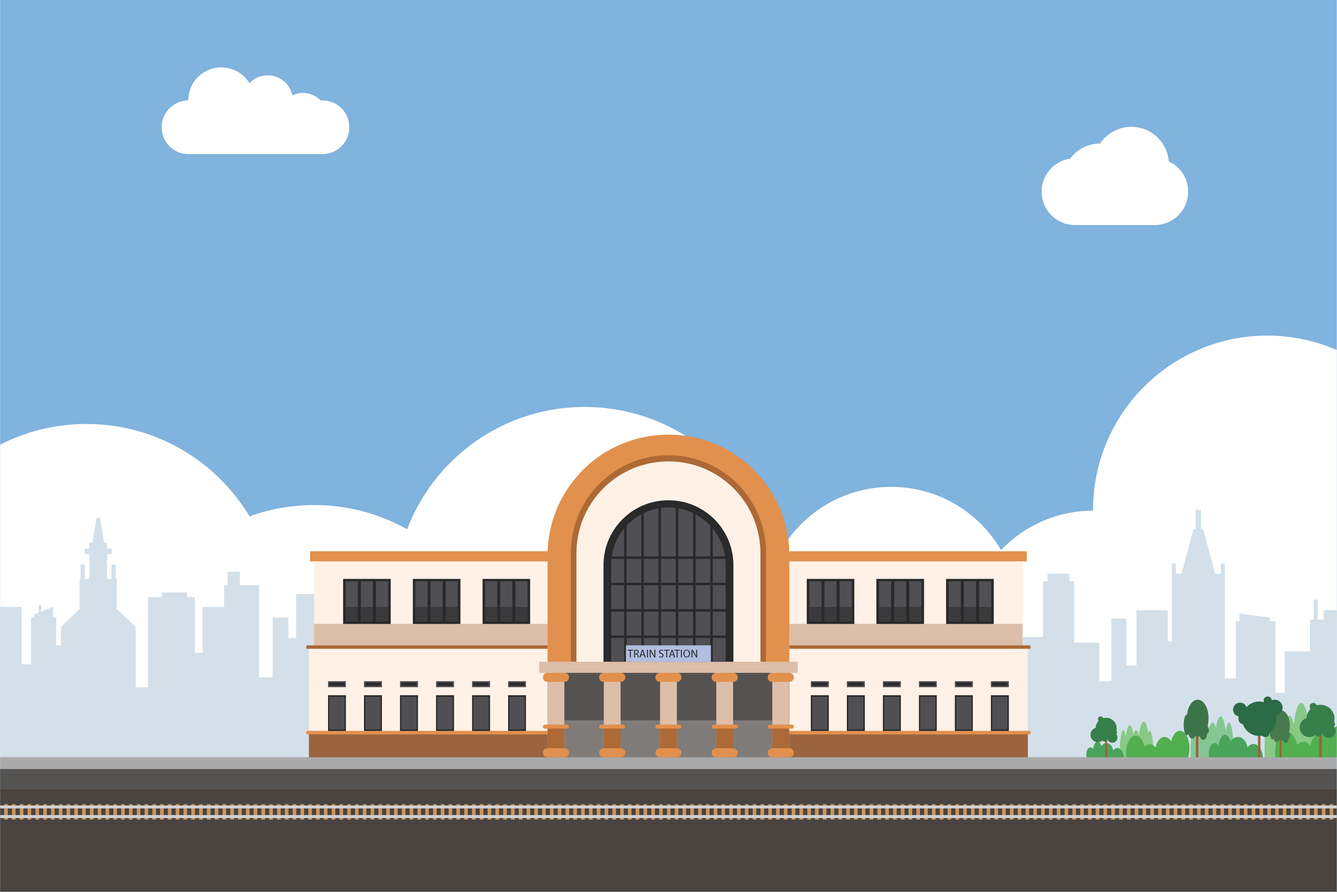
<style>
.page{position:relative;width:1337px;height:892px;background:#80b3dd}
.page>*{position:absolute;margin:0}
.t1{font:11.1px "Arcon-Regular";color:#252e33}
</style>
<div class="page">
<p class="t1" style="left:628px;top:649px;width:69px;height:8px">TRAIN STATION</p>
</div>
